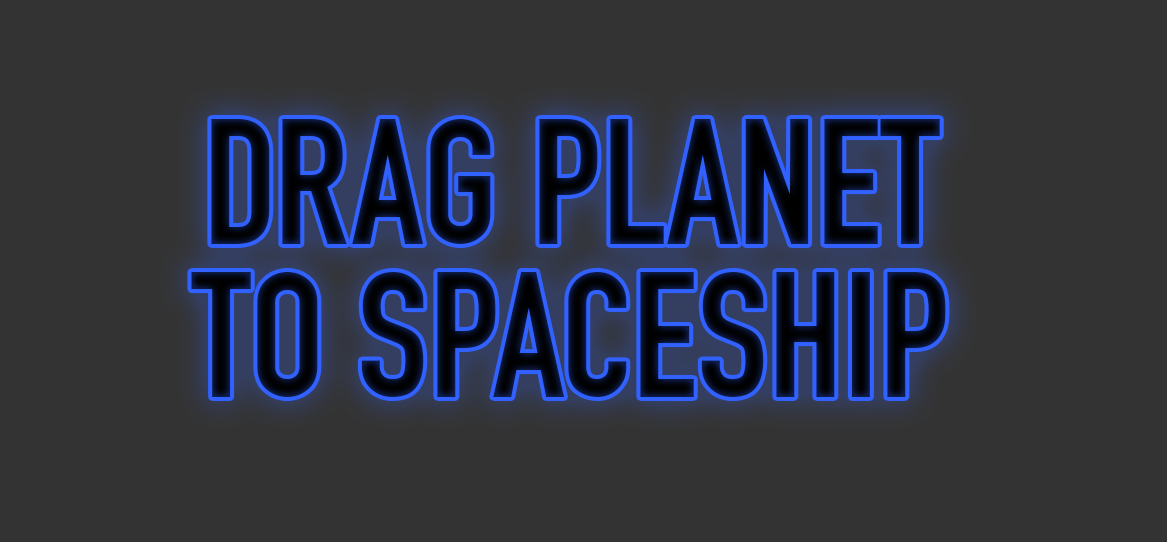
<style>
.page{position:relative;width:1167px;height:542px;background:#333333}
.page>*{position:absolute;margin:0}
.t1{font:175.4px/152.1px "DINEngschrift";color:#040815;text-transform:uppercase}
</style>
<div class="page">
<p class="t1" style="left:191px;top:119px;width:755px;height:278px;text-align:center">drag planet <br>to spaceship</p>
</div>
